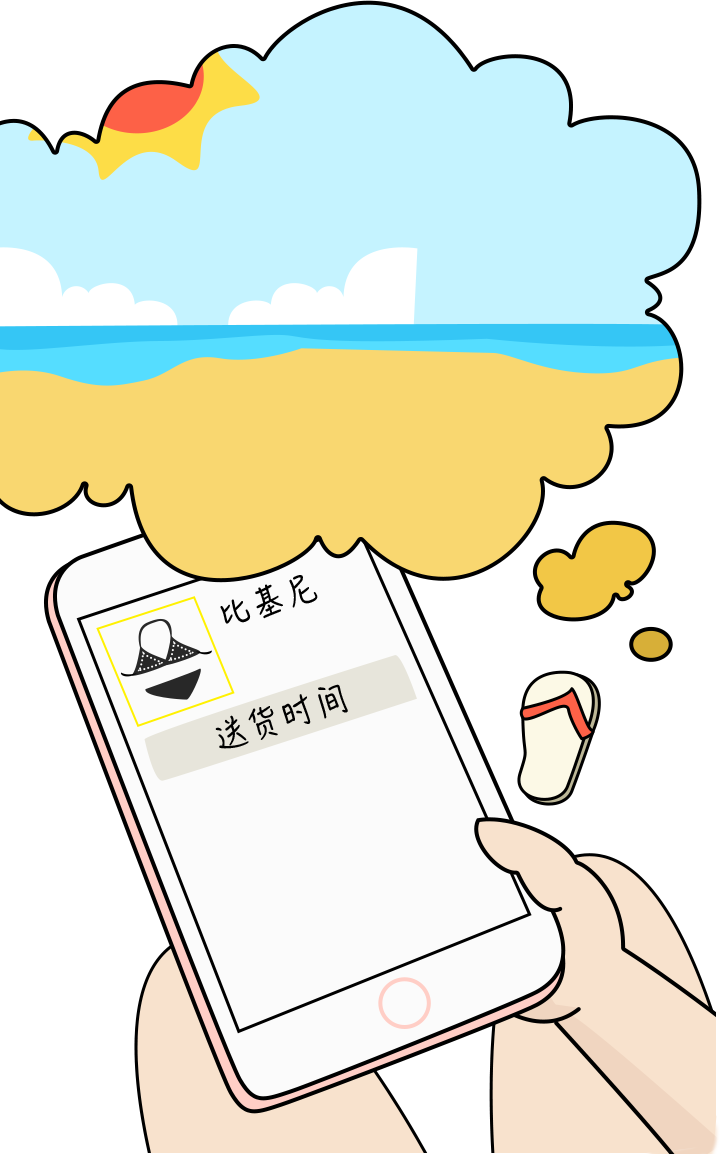
<style>
.page{position:relative;width:720px;height:1154px;background:#ffffff}
.page>*{position:absolute;margin:0}
.t1{font:31.6px "HanziPenSC-W5";letter-spacing:0.1em;color:#000000}
</style>
<div class="page">
<p class="t1" style="left:220px;top:575px;width:98px;height:49px;rotate:-18deg">比基尼</p>
<p class="t1" style="left:215px;top:684px;width:133px;height:65px;rotate:-18deg">送货时间</p>
</div>
